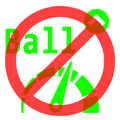
<style>
.page{position:relative;width:120px;height:120px;background:#ffffff}
.page>*{position:absolute;margin:0}
.t1{font:38px "Consolas-Bold";letter-spacing:0.05em;color:#13ff00;font-weight:bold;scale:0.8 1}
</style>
<div class="page">
<p class="t1" style="left:5px;top:26px;width:71px;height:28px">Ball</p>
</div>
